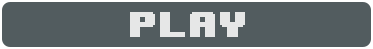
<style>
.page{position:relative;width:373px;height:49px;background:#525c5f}
.page>*{position:absolute;margin:0}
.t1{font:30px "8BITWONDERNominal";color:#e6e7e7}
</style>
<div class="page">
<p class="t1" style="left:130px;top:12px;width:115px;height:25px">play</p>
</div>
